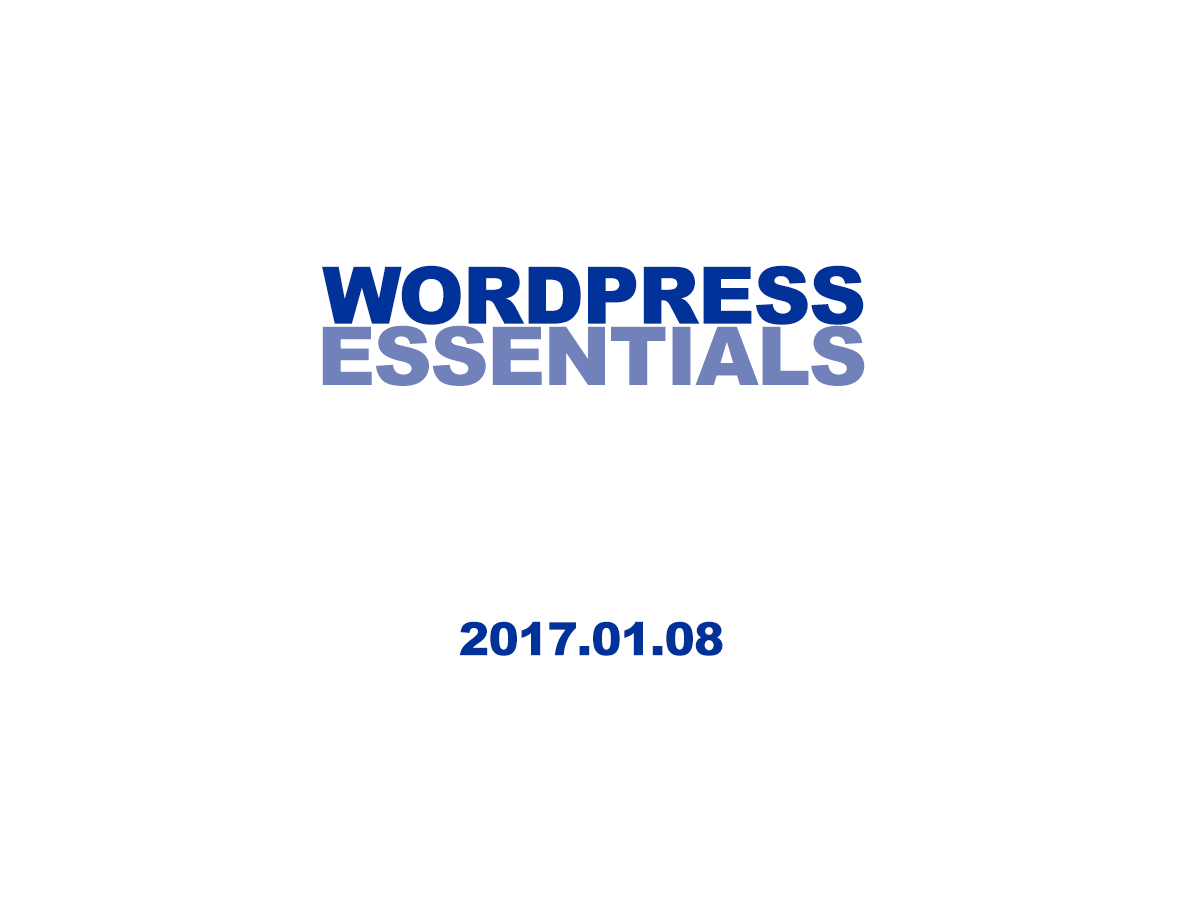
<style>
.page{position:relative;width:1200px;height:900px;background:#ffffff}
.page>*{position:absolute;margin:0}
.t1{font:79.6px "Arial-Black";letter-spacing:-0.025em;color:#00329a}
.t2{font:81.3px "Arial-Black";letter-spacing:-0.025em;color:#7182bb}
.t3{font:46px "Arial-Black";letter-spacing:-0.025em;color:#00329a}
</style>
<div class="page">
<p class="t1" style="left:322px;top:265px;width:542px;height:60px">WORDPRESS</p>
<p class="t2" style="left:322px;top:325px;width:543px;height:61px">ESSENTIALS</p>
<p class="t3" style="left:459px;top:621px;width:264px;height:35px">2017.01.08</p>
</div>
